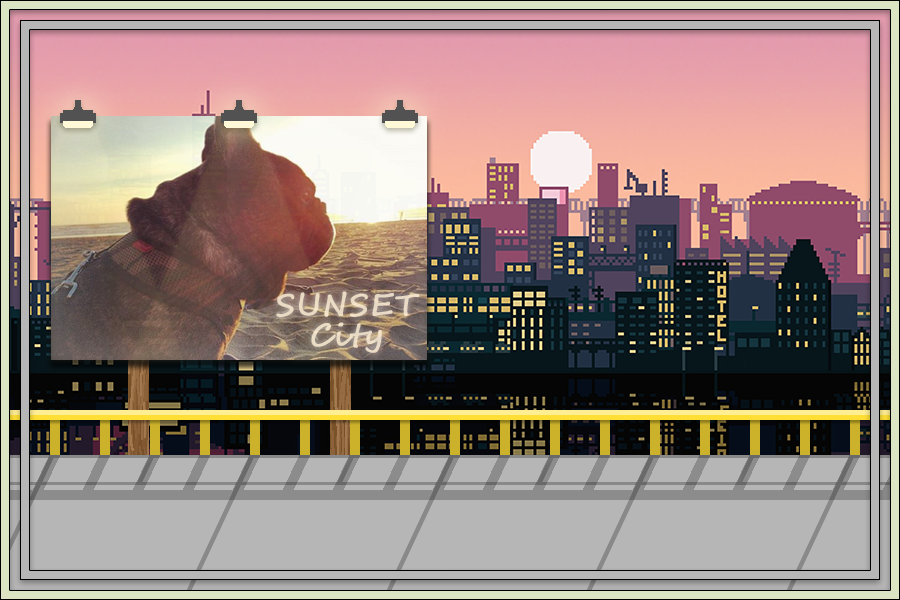
<style>
.page{position:relative;width:900px;height:600px}
.page>*{position:absolute;margin:0}
.t1{font:30px/30px "SegoeScript";letter-spacing:0.05em;color:#ffeed5;font-weight:bold}
</style>
<div class="page">
<p class="t1" style="left:276px;top:291px;width:144px;height:62px;text-align:center;opacity:0.8">SUNSET<br>City</p>
</div>
